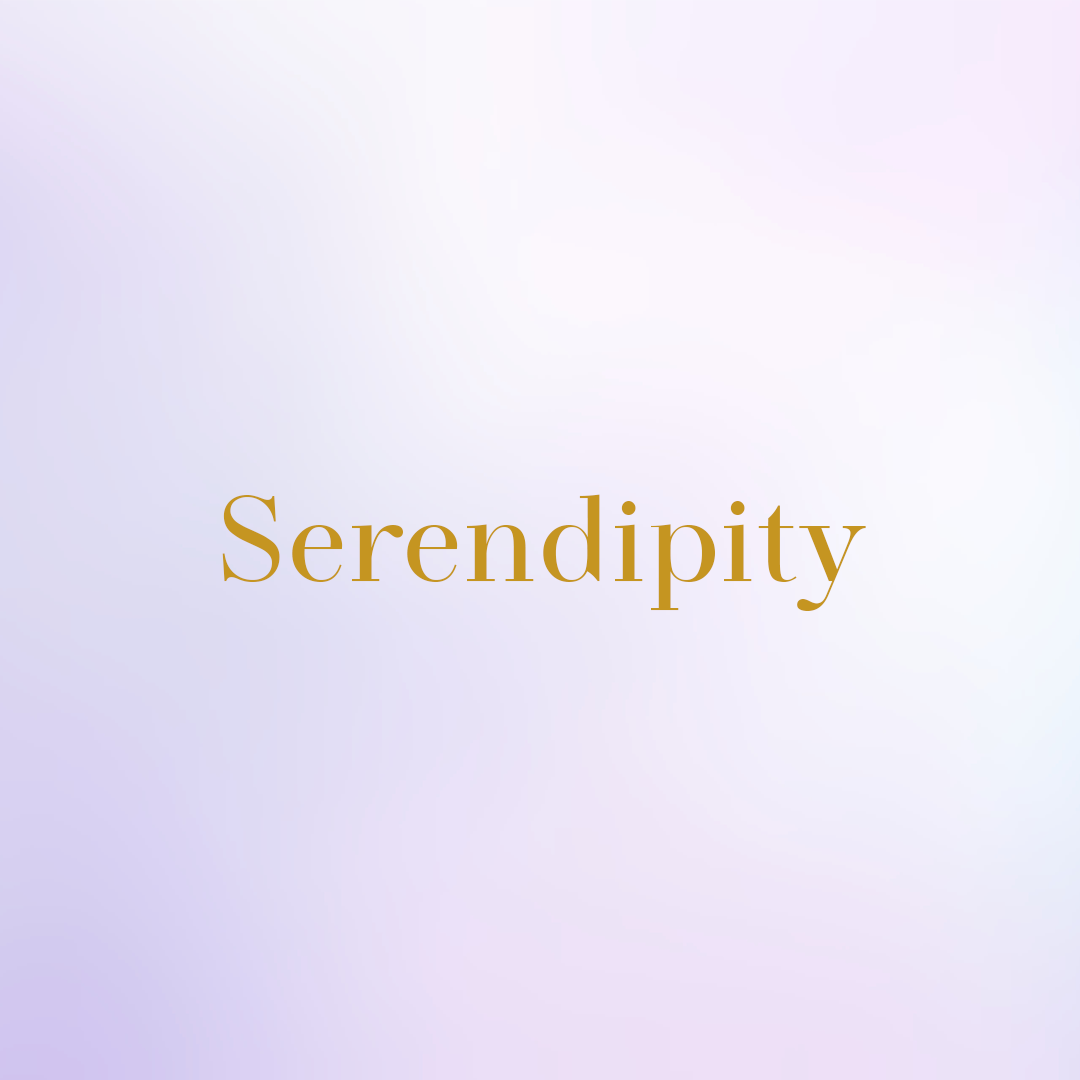
<style>
.page{position:relative;width:1080px;height:1080px}
.page>*{position:absolute;margin:0}
.t1{font:125px "Balerno-Bd";letter-spacing:0.02em;color:#c59521}
</style>
<div class="page">
<p class="t1" style="left:222px;top:494px;width:644px;height:117px">Serendipity</p>
</div>
